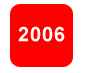
<style>
.page{position:relative;width:85px;height:73px;background:#ff0000}
.page>*{position:absolute;margin:0}
.t1{font:20px "Arial-BoldMT";letter-spacing:0.05em;color:#ffffff}
</style>
<div class="page">
<p class="t1" style="left:18px;top:26px;width:47px;height:16px">2006</p>
</div>
